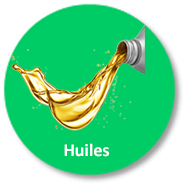
<style>
.page{position:relative;width:185px;height:185px;background:#00cc66}
.page>*{position:absolute;margin:0}
.t1{font:18px "Calibri-Bold";color:#ffffff}
</style>
<div class="page">
<p class="t1" style="left:64px;top:143px;width:45px;height:14px">Huiles</p>
</div>
